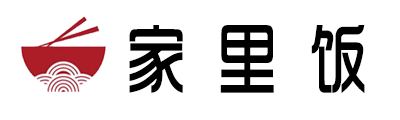
<style>
.page{position:relative;width:400px;height:120px;background:#ffffff}
.page>*{position:absolute;margin:0}
.t1{font:81px "TRENDS";color:#000000;font-weight:bold;scale:0.72 1}
</style>
<div class="page">
<p class="t1" style="left:129px;top:25px;width:236px;height:68px">家 里 饭</p>
</div>
